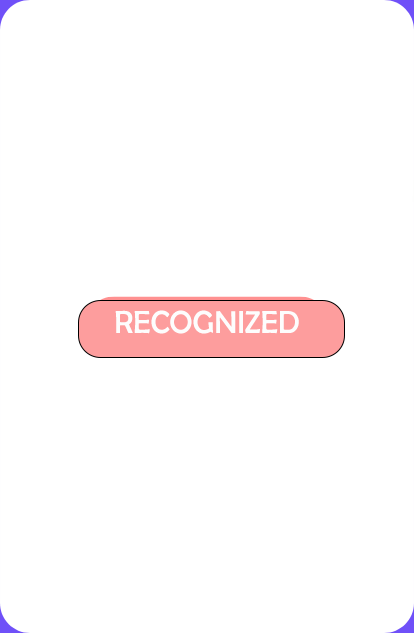
<style>
.page{position:relative;width:414px;height:633px;background:#ffffff}
.page>*{position:absolute;margin:0}
.t1{font:32px "BerlinSansFB-Reg";color:#fdfdfd}
</style>
<div class="page">
<p class="t1" style="left:115px;top:310px;width:184px;height:24px">RECOGNIZED</p>
</div>
